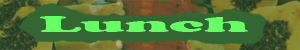
<style>
.page{position:relative;width:300px;height:50px;background:#336633}
.page>*{position:absolute;margin:0}
.t1{font:22.5px "CooperBlack";color:#66ff66;scale:2.93 1}
</style>
<div class="page">
<p class="t1" style="left:39px;top:16px;width:210px;height:16px">Lunch</p>
</div>
